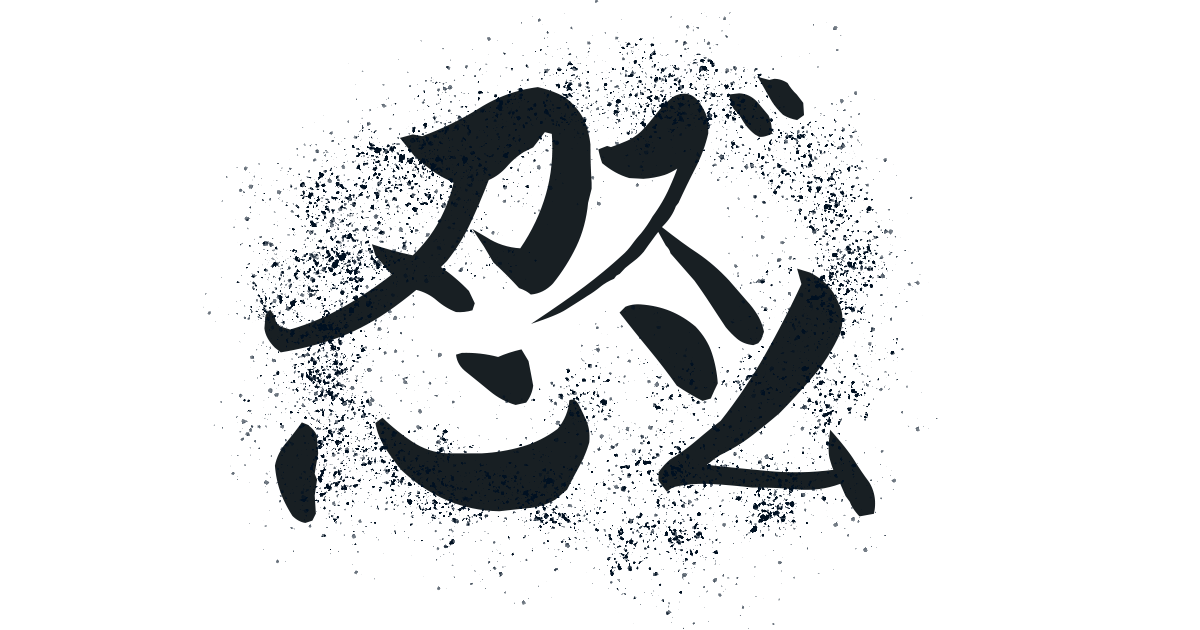
<style>
.page{position:relative;width:1200px;height:630px;background:#ffffff}
.page>*{position:absolute;margin:0}
.t1{font:390.6px "TA_kouran";letter-spacing:0.02em;color:#181f23}
.t2{font:598.2px "TA_kouran";letter-spacing:0.02em;color:#181f23}
.t3{font:492.8px "TA_kouran";letter-spacing:0.02em;color:#181f23}
</style>
<div class="page">
<p class="t1" style="left:531px;top:76px;width:273px;height:270px">ズ</p>
<p class="t2" style="left:264px;top:87px;width:454px;height:436px">忍</p>
<p class="t3" style="left:658px;top:268px;width:218px;height:249px;rotate:17deg">ム</p>
</div>
